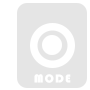
<style>
.page{position:relative;width:90px;height:90px;background:#e5e5e5}
.page>*{position:absolute;margin:0}
.t1{font:12px "Bauhaus93";letter-spacing:0.1em;color:#ffffff}
</style>
<div class="page">
<p class="t1" style="left:34px;top:74px;width:37px;height:9px">MODE</p>
</div>
